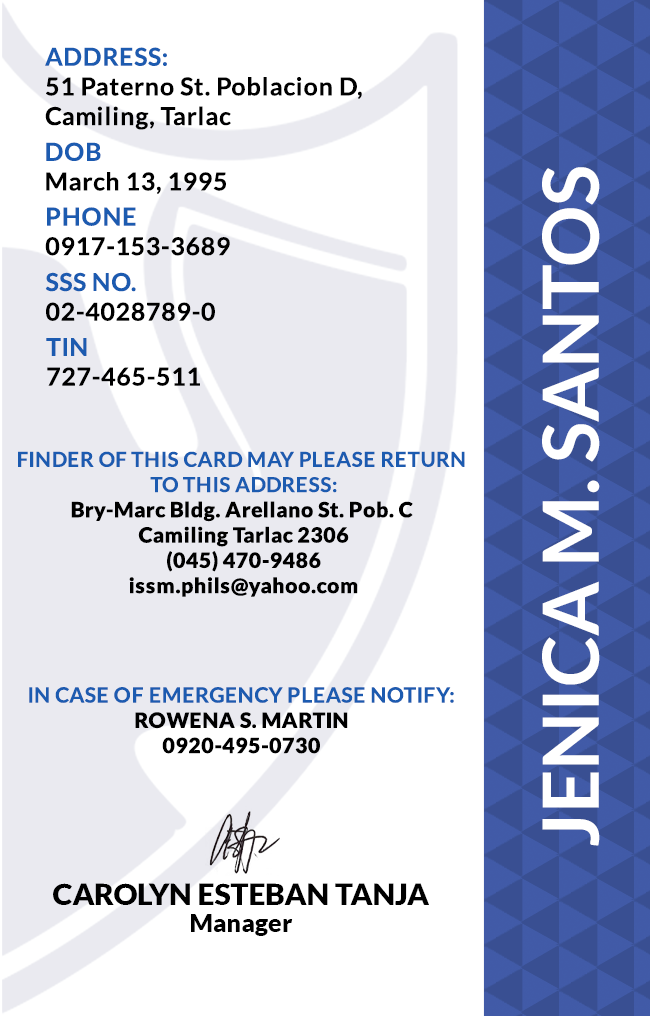
<style>
.page{position:relative;width:650px;height:1016px;background:#ffffff}
.page>*{position:absolute;margin:0}
.t1{font:24.7px/29.6px "Lato-Bold";letter-spacing:0.025em;color:#000000}
.t2{font:24.7px/29.6px "Lato-Bold";letter-spacing:0.025em;color:#1c5bb0}
.t3{font:77.6px "Lato-Bold";color:#ffffff}
.t4{font:21.1px "Lato-Black";letter-spacing:0.025em}
.t5{font:20.5px/25.3px "Lato-Bold";letter-spacing:0.025em;text-transform:uppercase}
.t6{font:21.1px/25.3px "Lato-Bold";letter-spacing:0.025em;color:#1c5bb0}
.t7{font:21.1px "Lato-Black";letter-spacing:0.025em;color:#000000}
.t8{font:29.5px "Lato-Black";color:#000000}
.t9{font:25px "Lato-Black";color:#000000}
</style>
<div class="page">
<p class="t1" style="left:45px;top:47px;width:317px;height:83px"><span class="t2">ADDRESS:<br></span>51 Paterno St. Poblacion D,<br>Camiling, Tarlac</p>
<p class="t1" style="left:46px;top:142px;width:180px;height:52px"><span class="t2">DOB<br></span>March 13, 1995</p>
<p class="t3" style="left:542px;top:167px;width:58px;height:679px;rotate:-90deg">JENICA M. SANTOS</p>
<p class="t1" style="left:45px;top:207px;width:185px;height:49px"><span class="t2">PHONE <br></span>0917-153-3689</p>
<p class="t1" style="left:45px;top:272px;width:170px;height:49px"><span class="t2">SSS NO.<br></span>02-4028789-0</p>
<p class="t1" style="left:46px;top:338px;width:154px;height:48px"><span class="t2">TIN<br></span>727-465-511</p>
<p class="t4" style="left:18px;top:451px;width:447px;height:146px;text-align:center"><span class="t5">Finder of this card may please return <br>to this address:<br></span>Bry-Marc Bldg. Arellano St. Pob. C <br>Camiling Tarlac 2306<br>(045) 470-9486<br>issm.phils@yahoo.com</p>
<p class="t6" style="left:29px;top:687px;width:425px;height:67px;text-align:center">IN CASE OF EMERGENCY PLEASE NOTIFY:<br><span class="t7">ROWENA S. MARTIN<br>0920-495-0730</span></p>
<p class="t8" style="left:53px;top:883px;width:376px;height:22px">CAROLYN ESTEBAN TANJA</p>
<p class="t9" style="left:191px;top:914px;width:102px;height:22px">Manager</p>
</div>
